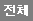
<style>
.page{position:relative;width:33px;height:21px;background:#7e7e7e}
.page>*{position:absolute;margin:0}
.t1{font:12px "Dotum";color:#ffffff;font-weight:bold}
</style>
<div class="page">
<p class="t1" style="left:4px;top:5px;width:24px;height:11px">전체</p>
</div>
